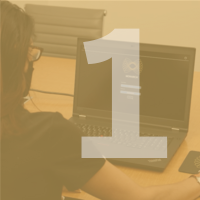
<style>
.page{position:relative;width:200px;height:200px}
.page>*{position:absolute;margin:0}
.t1{font:187.5px "PostGrotesk-Bold";color:#c7bba3}
</style>
<div class="page">
<p class="t1" style="left:81px;top:28px;width:87px;height:130px">1</p>
</div>
